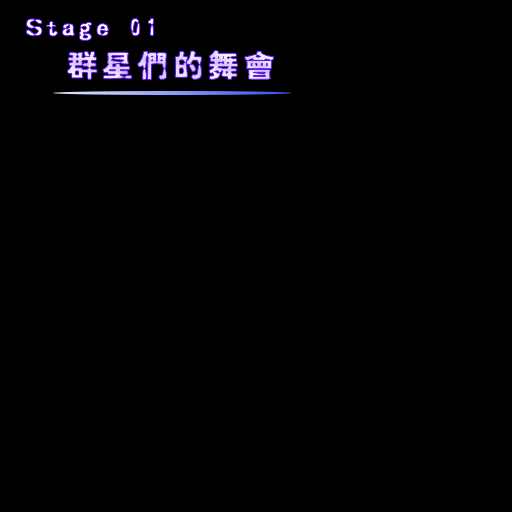
<style>
.page{position:relative;width:512px;height:512px;background:#000000}
.page>*{position:absolute;margin:0}
.t1{font:24px "HYp1gf";letter-spacing:0.15em;color:#ffffff;font-weight:bold}
.t2{font:30px "HYp1gf";letter-spacing:0.15em;font-weight:bold}
</style>
<div class="page">
<p class="t1" style="left:26px;top:18px;width:128px;height:23px">Stage 01</p>
<p class="t2" style="left:67px;top:50px;width:207px;height:30px">群星们的舞会</p>
</div>
